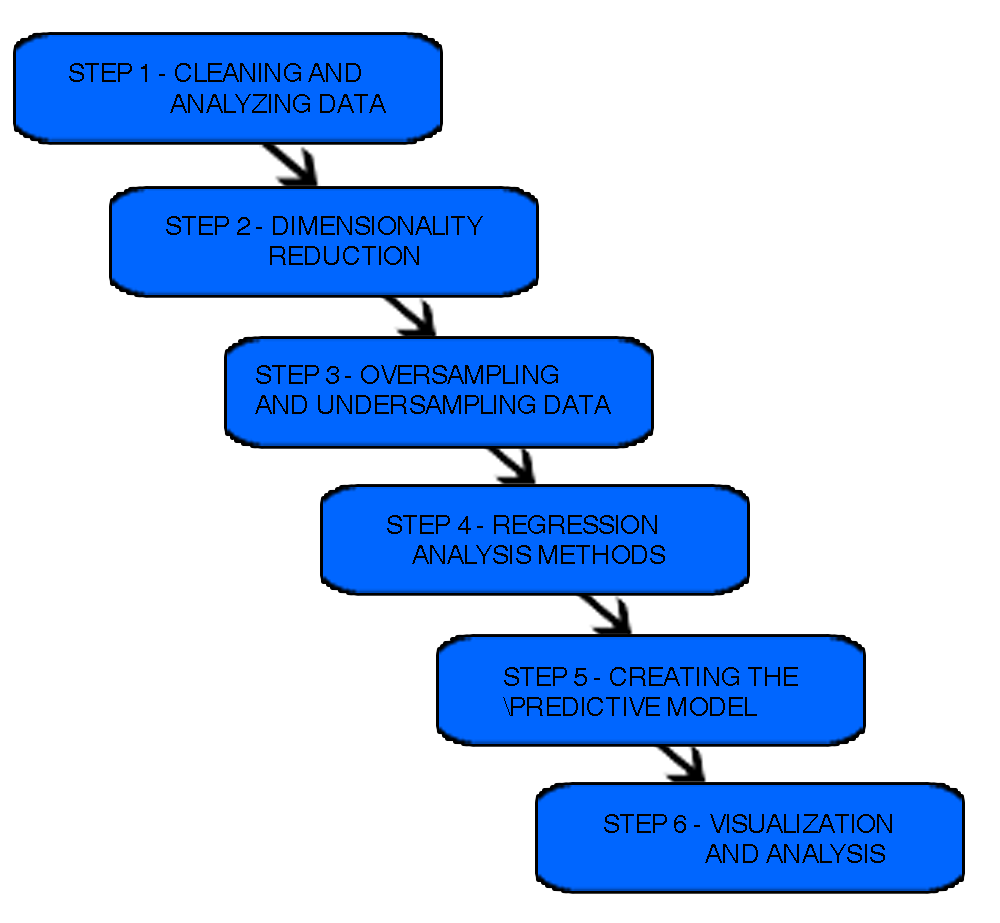
<style>
.page{position:relative;width:1000px;height:923px;background:#ffffff}
.page>*{position:absolute;margin:0}
.t1{font:25.6px "Helvetica";color:#000000;text-transform:uppercase}
</style>
<div class="page">
<p class="t1" style="left:69px;top:63px;width:317px;height:50px">Step 1 - Cleaning and <br>                analyzing data</p>
<p class="t1" style="left:166px;top:216px;width:317px;height:49px">Step 2 - Dimensionality <br>                reduction</p>
<p class="t1" style="left:255px;top:365px;width:356px;height:49px">Step 3 - Oversampling <br>and undersampling data</p>
<p class="t1" style="left:387px;top:515px;width:278px;height:49px">Step 4 - Regression <br>    analysis methods</p>
<p class="t1" style="left:503px;top:667px;width:295px;height:49px">Step 5 - Creating the <br>\predictive model</p>
<p class="t1" style="left:604px;top:814px;width:288px;height:49px">Step 6 - Visualization <br>                and Analysis</p>
</div>
